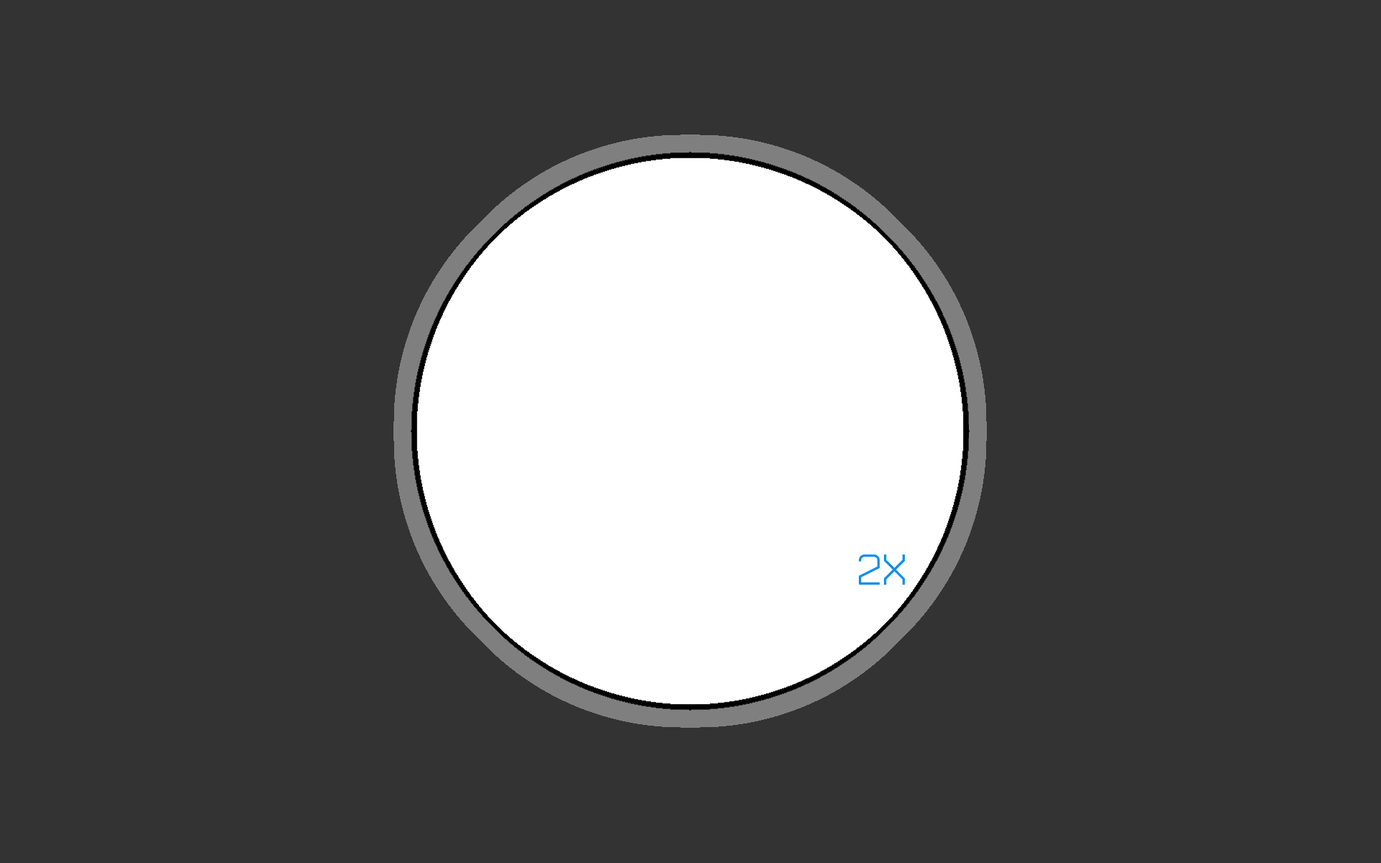
<style>
.page{position:relative;width:1381px;height:863px;background:#333333}
.page>*{position:absolute;margin:0}
.t1{font:43.2px "Arame-Thin";color:#108fea}
</style>
<div class="page">
<p class="t1" style="left:859px;top:555px;width:46px;height:30px">2x</p>
</div>
